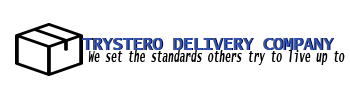
<style>
.page{position:relative;width:350px;height:100px;background:#ffffff}
.page>*{position:absolute;margin:0}
.t1{font:16.7px "LucidaSans-TypewriterBold";color:#3352af}
.t2{font:16.7px "LucidaSans-TypewriterBold"}
.t3{font:15.3px "LucidaSans-TypewriterBoldOblique";color:#000000;scale:0.62 1}
</style>
<div class="page">
<p class="t1" style="left:82px;top:38px;width:252px;height:12px">TRYSTERO DELIVERY COMPANY</p>
<p class="t2" style="left:83px;top:38px;width:252px;height:12px">TRYSTERO DELIVERY COMPANY</p>
<p class="t3" style="left:88px;top:50px;width:257px;height:15px">We set the standards others try to live up to</p>
</div>
